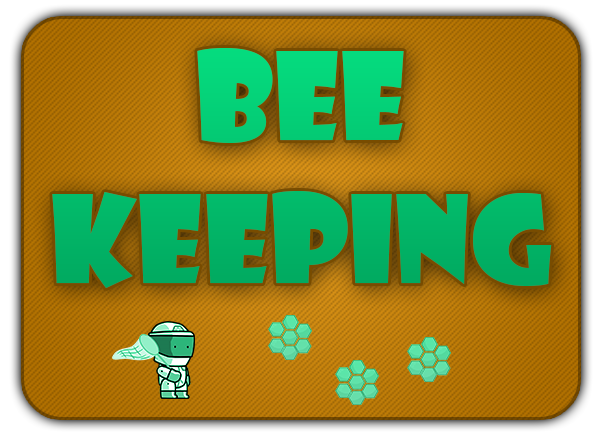
<style>
.page{position:relative;width:601px;height:436px}
.page>*{position:absolute;margin:0}
.t1{font:119.2px "ShowcardGothic-Reg";color:#02b769}
</style>
<div class="page">
<p class="t1" style="left:52px;top:48px;width:500px;height:240px;text-align:center">bee<br>keeping</p>
</div>
